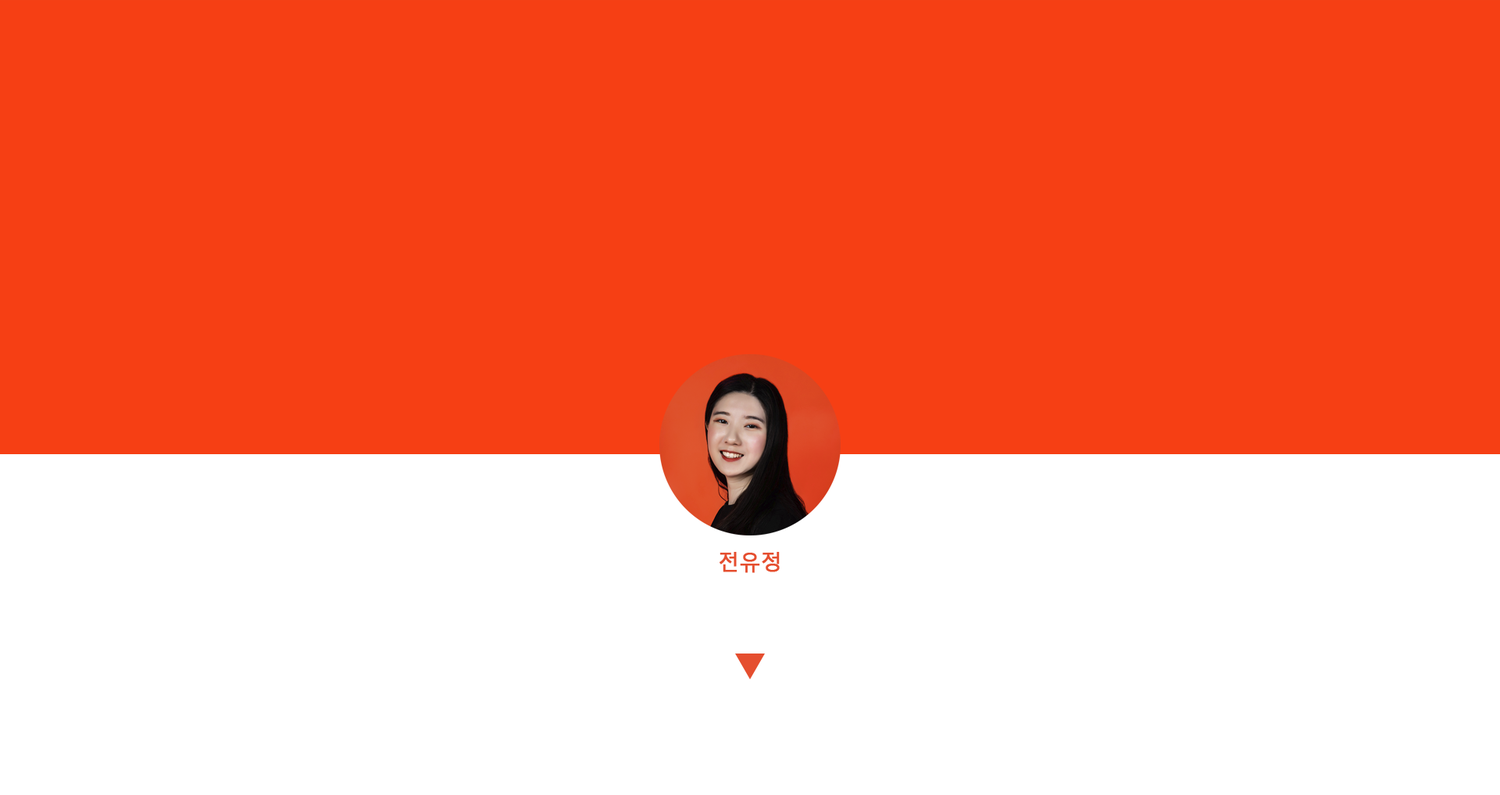
<style>
.page{position:relative;width:1500px;height:795px;background:#f63f14}
.page>*{position:absolute;margin:0}
.t1{font:20.8px "MalgunGothic";color:#e54e2f;font-weight:bold}
</style>
<div class="page">
<p class="t1" style="left:720px;top:552px;width:60px;height:21px">전유정</p>
</div>
